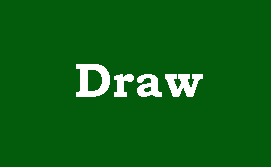
<style>
.page{position:relative;width:271px;height:167px;background:#035b0c}
.page>*{position:absolute;margin:0}
.t1{font:48px "BookmanOldStyle-Bold";letter-spacing:0.025em;color:#ffffff}
</style>
<div class="page">
<p class="t1" style="left:76px;top:64px;width:127px;height:33px">Draw</p>
</div>
